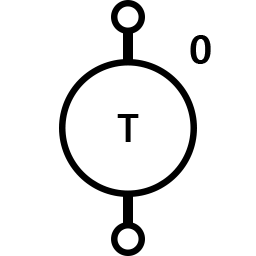
<style>
.page{position:relative;width:256px;height:256px;background:#ffffff}
.page>*{position:absolute;margin:0}
.t1{font:39.6px "MalgunGothicBold";color:#000000}
.t2{font:37.5px "MalgunGothicBold";color:#000000}
</style>
<div class="page">
<p class="t1" style="left:190px;top:35px;width:21px;height:29px">0</p>
<p class="t2" style="left:117px;top:114px;width:22px;height:28px">T</p>
</div>
